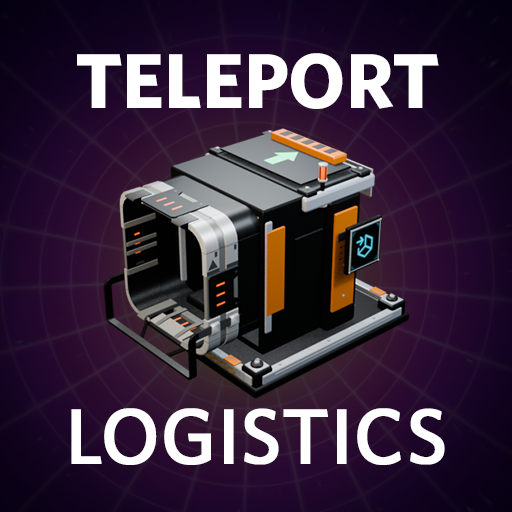
<style>
.page{position:relative;width:512px;height:512px}
.page>*{position:absolute;margin:0}
.t1{font:78px "Whitney-Bold";color:#ffffff}
.t2{font:78px "Whitney-Medium";color:#ffffff;font-weight:bold}
</style>
<div class="page">
<p class="t1" style="left:77px;top:53px;width:362px;height:56px">TELEPORT</p>
<p class="t2" style="left:71px;top:408px;width:374px;height:57px">LOGISTICS</p>
</div>
